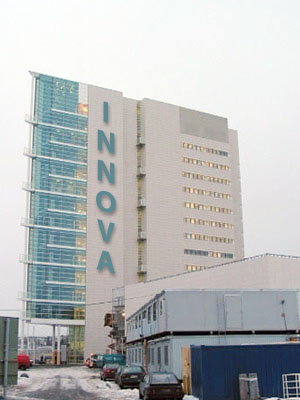
<style>
.page{position:relative;width:300px;height:400px}
.page>*{position:absolute;margin:0}
.t1{font:30px "MyriadPro-Bold";color:#5d8992;scale:1.03 1}
</style>
<div class="page">
<p class="t1" style="left:96px;top:101px;width:20px;height:173px;rotate:14deg">INNOVA</p>
</div>
